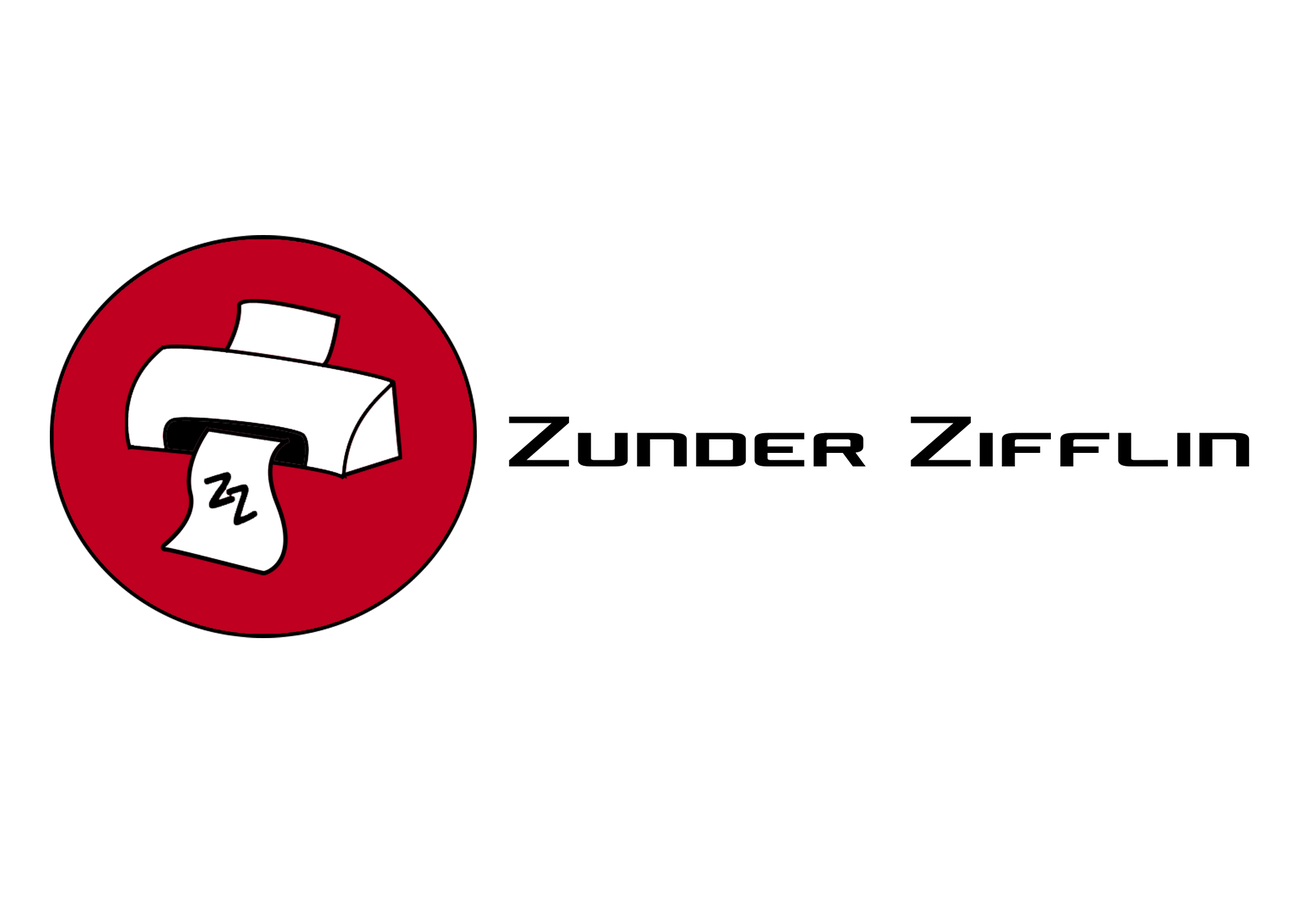
<style>
.page{position:relative;width:1292px;height:923px;background:#ffffff}
.page>*{position:absolute;margin:0}
.t1{font:92.3px "ConcielianJetCondensed";color:#000000}
</style>
<div class="page">
<p class="t1" style="left:509px;top:417px;width:741px;height:49px">Zunder Zifflin</p>
</div>
